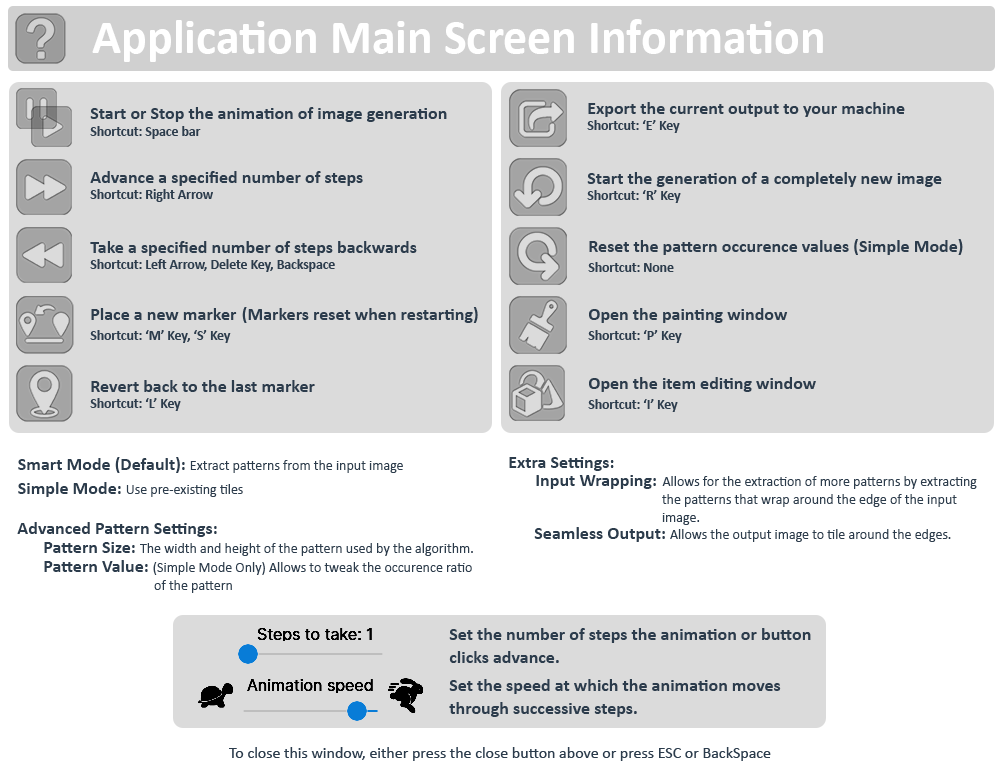
<style>
.page{position:relative;width:1000px;height:775px;background:#dbdbdb}
.page>*{position:absolute;margin:0}
.t1{font:48px "Calibri-Bold";color:#ffffff}
.t2{font:18px "Calibri-Bold";color:#2c3c4c}
.t3{font:13.6px "Calibri-Bold";color:#2c3c4c}
.t4{font:18px/20.4px "Calibri-Bold";color:#2c3c4c}
.t5{font:13.6px/20.4px "Calibri-Bold";color:#2c3c4c}
.t6{font:14px/23.9px "Calibri";color:#2c3c4c}
.t7{font:18px/23.9px "Calibri-Bold";color:#2c3c4c}
.t8{font:14px/18px "Calibri";color:#2c3c4c}
.t9{font:18px/18px "Calibri-Bold";color:#2c3c4c}
.t10{font:14px "Calibri";color:#2c3c4c}
.t11{font:18px/23px "Calibri-Bold";color:#2c3c4c}
.t12{font:16px "Calibri";color:#2c3c4c}
</style>
<div class="page">
<p class="t1" style="left:92px;top:19px;width:731px;height:43px">Application Main Screen Information</p>
<p class="t2" style="left:587px;top:102px;width:318px;height:31px">Export the current output to your machine<br><span class="t3">Shortcut: ‘E’ Key</span></p>
<p class="t2" style="left:90px;top:107px;width:357px;height:32px">Start or Stop the animation of image generation<br><span class="t3">Shortcut: Space bar</span></p>
<p class="t2" style="left:90px;top:171px;width:273px;height:31px">Advance a specified number of steps<br><span class="t3">Shortcut: Right Arrow</span></p>
<p class="t2" style="left:587px;top:172px;width:355px;height:31px">Start the generation of a completely new image <br><span class="t3">Shortcut: ‘R’ Key</span></p>
<p class="t3" style="left:90px;top:241px;width:327px;height:31px"><span class="t2">Take a specified number of steps backwards<br></span>Shortcut: Left Arrow, Delete Key, Backspace</p>
<p class="t4" style="left:588px;top:239px;width:375px;height:33px">Reset the pattern occurence values (Simple Mode)<br><span class="t5">Shortcut: None</span></p>
<p class="t4" style="left:90px;top:307px;width:388px;height:36px">Place a new marker (Markers reset when restarting)<br><span class="t5">Shortcut: ‘M’ Key, ‘S’ Key</span></p>
<p class="t4" style="left:588px;top:308px;width:200px;height:35px">Open the painting window<br><span class="t5">Shortcut: ‘P’ Key</span></p>
<p class="t4" style="left:588px;top:377px;width:228px;height:35px">Open the item editing window<br><span class="t5">Shortcut: ‘I’ Key</span></p>
<p class="t2" style="left:90px;top:380px;width:225px;height:31px">Revert back to the last marker<br><span class="t3">Shortcut: ‘L’ Key</span></p>
<p class="t6" style="left:18px;top:457px;width:385px;height:40px"><span class="t7">Smart Mode (Default): </span>Extract patterns from the input image<br><span class="t7">Simple Mode: </span>Use pre-existing tiles</p>
<p class="t2" style="left:509px;top:457px;width:105px;height:14px">Extra Settings:</p>
<p class="t8" style="left:536px;top:475px;width:441px;height:50px"><span class="t9">Input Wrapping: </span>Allows for the extraction of more patterns by extracting  <br>                                        the patterns that wrap around the edge of the input <br>                                        image.</p>
<p class="t2" style="left:17px;top:522px;width:200px;height:15px">Advanced Pattern Settings:</p>
<p class="t10" style="left:534px;top:527px;width:417px;height:15px"><span class="t2">Seamless Output: </span>Allows the output image to tile around the edges.</p>
<p class="t10" style="left:44px;top:542px;width:429px;height:14px"><span class="t2">Pattern Size: </span>The width and height of the pattern used by the algorithm.</p>
<p class="t8" style="left:44px;top:560px;width:428px;height:33px"><span class="t9">Pattern Value: </span>(Simple Mode Only) Allows to tweak the occurence ratio <br>                                   of the pattern</p>
<p class="t11" style="left:449px;top:628px;width:362px;height:35px">Set the number of steps the animation or button <br>clicks advance.</p>
<p class="t11" style="left:449px;top:679px;width:332px;height:38px">Set the speed at which the animation moves <br>through successive steps.</p>
<p class="t12" style="left:229px;top:747px;width:542px;height:14px">To close this window, either press the close button above or press ESC or BackSpace</p>
</div>
